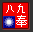
<style>
.page{position:relative;width:33px;height:32px;background:#f20000}
.page>*{position:absolute;margin:0}
.t1{font:10.4px "SimSun";color:#ffffff}
.t2{font:11.7px "SimSun";color:#ffffff}
</style>
<div class="page">
<p class="t1" style="left:6px;top:4px;width:19px;height:9px">八九</p>
<p class="t2" style="left:16px;top:15px;width:11px;height:12px">奉</p>
</div>
